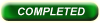
<style>
.page{position:relative;width:100px;height:23px}
.page>*{position:absolute;margin:0}
.t1{font:10.7px "Arial-BoldItalicMT";color:#fcfbf9}
</style>
<div class="page">
<p class="t1" style="left:18px;top:7px;width:67px;height:9px">COMPLETED</p>
</div>
